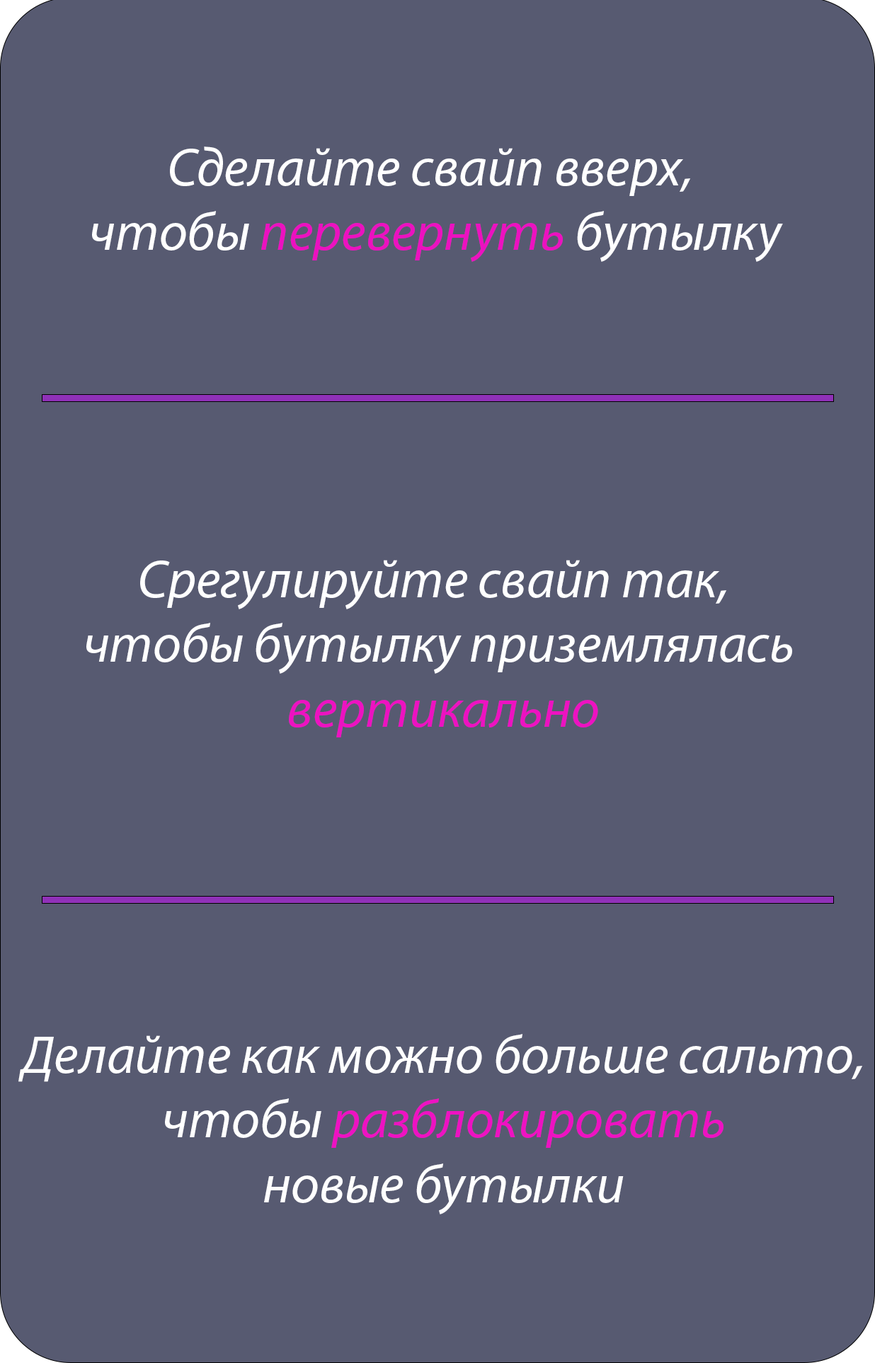
<style>
.page{position:relative;width:875px;height:1363px;background:#575a71}
.page>*{position:absolute;margin:0}
.t1{font:53.9px "MyriadPro-It";color:#ffffff}
.t2{font:53.9px "MyriadPro-It";color:#ec11c0}
.t3{font:53.9px "MyriadPro-It";color:#ed12c1}
.t4{font:53.9px "MyriadPro-It";color:#ee12c2}
</style>
<div class="page">
<p class="t1" style="left:92px;top:147px;width:691px;height:115px;text-align:center">Сделайте свайп вверх, <br>чтобы <span class="t2">перевернуть</span> бутылку</p>
<p class="t1" style="left:86px;top:560px;width:706px;height:177px;text-align:center">Срегулируйте свайп так, <br>чтобы бутылку приземлялась<br> <span class="t3">вертикально</span></p>
<p class="t1" style="left:18px;top:1034px;width:844px;height:180px;text-align:center">Делайте как можно больше сальто, <br>чтобы <span class="t4">разблокировать <br></span>новые бутылки</p>
</div>
